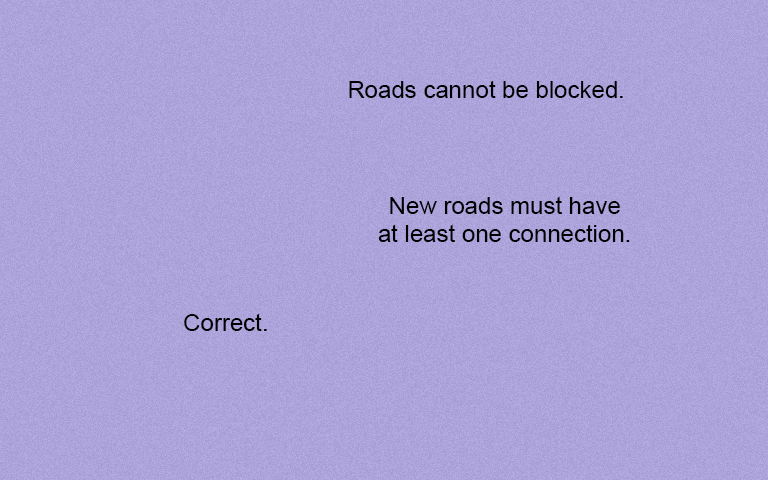
<style>
.page{position:relative;width:768px;height:480px}
.page>*{position:absolute;margin:0}
.t1{font:24px "ArialMT";color:#000000}
</style>
<div class="page">
<p class="t1" style="left:349px;top:80px;width:274px;height:18px">Roads cannot be blocked.</p>
<p class="t1" style="left:378px;top:196px;width:252px;height:46px;text-align:center">New roads must have<br>at least one connection.</p>
<p class="t1" style="left:184px;top:313px;width:83px;height:18px">Correct.</p>
</div>
